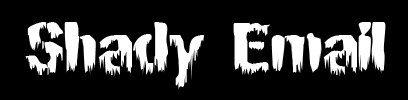
<style>
.page{position:relative;width:408px;height:100px;background:#000000}
.page>*{position:absolute;margin:0}
.t1{font:72px "BNMansonNights";color:#ffffff}
</style>
<div class="page">
<p class="t1" style="left:25px;top:22px;width:361px;height:67px">Shady Email</p>
</div>
